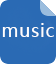
<style>
.page{position:relative;width:56px;height:64px;background:#2a6ab4}
.page>*{position:absolute;margin:0}
.t1{font:18px "MicrosoftYaHei";letter-spacing:0.04em;color:#fefefe}
</style>
<div class="page">
<p class="t1" style="left:2px;top:23px;width:52px;height:14px">music</p>
</div>
